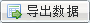
<style>
.page{position:relative;width:90px;height:23px}
.page>*{position:absolute;margin:0}
.t1{font:12px "SimSun";letter-spacing:0.1em;color:#2d2e30}
</style>
<div class="page">
<p class="t1" style="left:27px;top:5px;width:51px;height:12px">导出数据</p>
</div>
